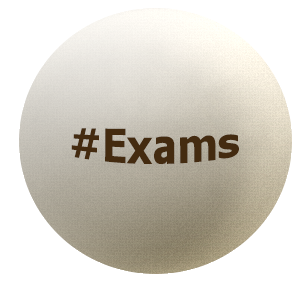
<style>
.page{position:relative;width:306px;height:290px;background:#ffffff}
.page>*{position:absolute;margin:0}
.t1{font:37.5px "Verdana-Bold";color:#442b10}
</style>
<div class="page">
<p class="t1" style="left:71px;top:128px;width:168px;height:36px">#Exams</p>
</div>
